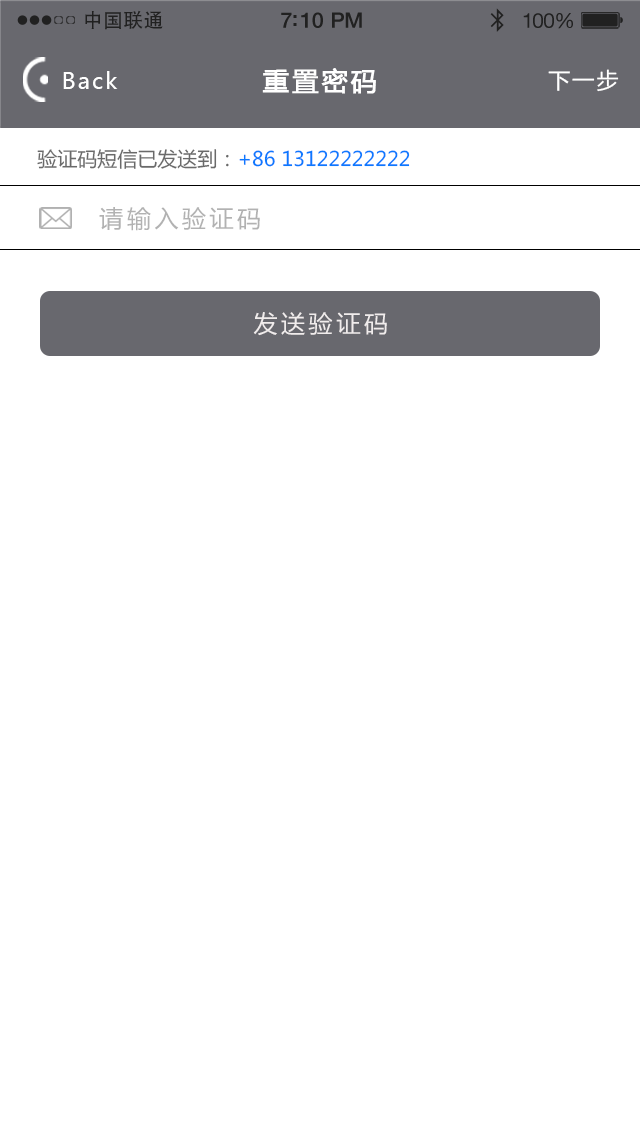
<style>
.page{position:relative;width:640px;height:1136px;background:#ffffff}
.page>*{position:absolute;margin:0}
.t1{font:19.7px "AdobeHeitiStd-Regular";letter-spacing:0.02em;color:#212121}
.t2{font:21.4px "HelveticaNeue-Medium";letter-spacing:-0.02em;color:#212121}
.t3{font:20.6px "HelveticaNeue";letter-spacing:-0.02em;color:#212121}
.t4{font:22px "MicrosoftYaHei";letter-spacing:0.1em;color:#ffffff}
.t5{font:26px "MicrosoftYaHei";letter-spacing:0.1em;color:#ffffff;font-weight:bold}
.t6{font:20px "MicrosoftYaHei";color:#0c79ff}
.t7{font:20px "MicrosoftYaHei";color:#6a6a6a}
.t8{font:24px "MicrosoftYaHei";letter-spacing:0.15em;color:#b2b2b2}
.t9{font:24px "MicrosoftYaHei";letter-spacing:0.15em;color:#f0ecec}
</style>
<div class="page">
<p class="t1" style="left:85px;top:10px;width:78px;height:20px">中国联通</p>
<p class="t2" style="left:281px;top:12px;width:81px;height:16px">7:10 PM</p>
<p class="t3" style="left:523px;top:13px;width:50px;height:16px">100%</p>
<p class="t4" style="left:63px;top:71px;width:55px;height:18px">Back</p>
<p class="t5" style="left:262px;top:68px;width:114px;height:26px">重置密码</p>
<p class="t4" style="left:548px;top:69px;width:71px;height:23px">下一步</p>
<p class="t6" style="left:37px;top:149px;width:373px;height:20px"><span class="t7">验证码短信已发送到：</span>+86 13122222222</p>
<p class="t8" style="left:99px;top:207px;width:161px;height:24px">请输入验证码</p>
<p class="t9" style="left:253px;top:312px;width:134px;height:24px">发送验证码</p>
</div>
